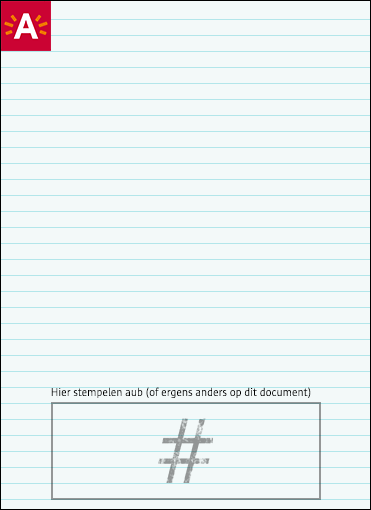
<style>
.page{position:relative;width:371px;height:510px;background:#f3f9f9}
.page>*{position:absolute;margin:0}
.t1{font:11.5px "SunAntwerpen-Light";color:#000000}
</style>
<div class="page">
<p class="t1" style="left:51px;top:387px;width:260px;height:11px">Hier stempelen aub (of ergens anders op dit document)</p>
</div>
